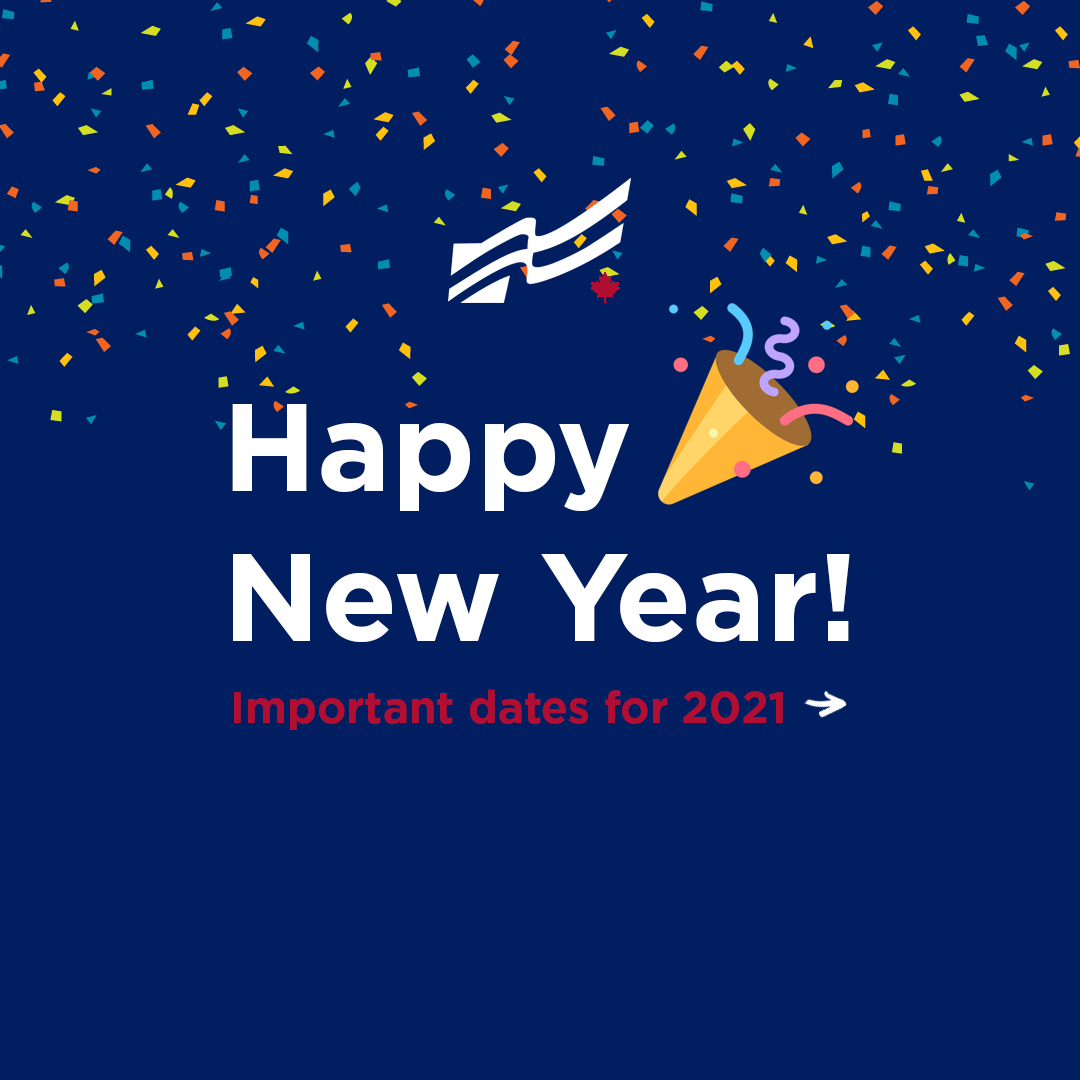
<style>
.page{position:relative;width:1080px;height:1080px;background:#001e60}
.page>*{position:absolute;margin:0}
.t1{font:124.8px "Gotham-Bold";color:#ffffff}
.t2{font:44.5px "Gotham-Bold";color:#b20e31}
</style>
<div class="page">
<p class="t1" style="left:232px;top:404px;width:618px;height:238px">Happy<br>New Year!</p>
<p class="t2" style="left:234px;top:689px;width:549px;height:41px">Important dates for 2021</p>
</div>
